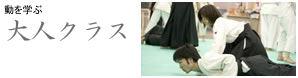
<style>
.page{position:relative;width:298px;height:78px;background:#ffffff}
.page>*{position:absolute;margin:0}
.t1{font:10px "MS-PGothic"}
.t2{font:25px "AGENDAJinmeiSSeikaishotaiL1";color:#6f6c6c}
</style>
<div class="page">
<p class="t1" style="left:4px;top:5px;width:38px;height:10px">動を学ぶ</p>
<p class="t2" style="left:7px;top:19px;width:119px;height:22px">大人クラス</p>
</div>
